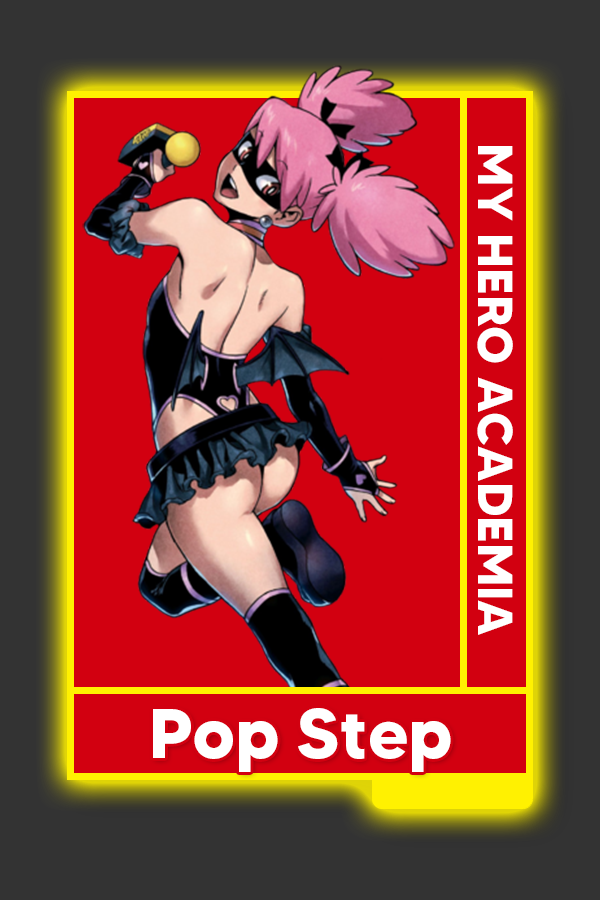
<style>
.page{position:relative;width:600px;height:900px;background:#d20010}
.page>*{position:absolute;margin:0}
.t1{font:48.8px "MADETOMMY-Bold";color:#ffffff}
.t2{font:70.1px "MADETOMMY-Bold";color:#ffffff}
</style>
<div class="page">
<p class="t1" style="left:477px;top:146px;width:36px;height:489px;rotate:90deg">MY HERO ACADEMIA</p>
<p class="t2" style="left:153px;top:708px;width:298px;height:64px">Pop Step</p>
</div>
